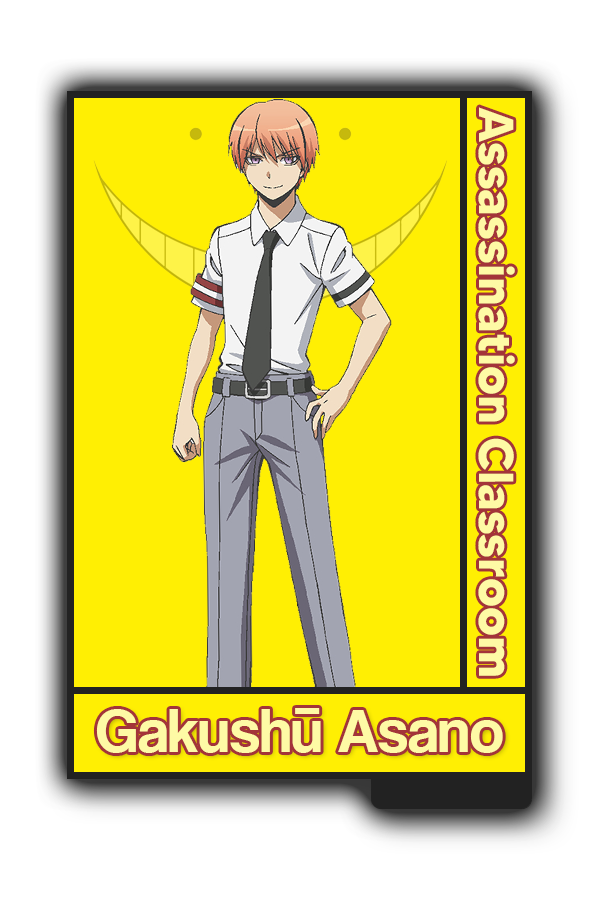
<style>
.page{position:relative;width:600px;height:900px;background:#ffef03}
.page>*{position:absolute;margin:0}
.t1{font:48.8px "MADETOMMY-Bold";color:#fefaa5}
.t2{font:62.8px "CoolveticaRg-Regular";color:#fefaa5}
</style>
<div class="page">
<p class="t1" style="left:478px;top:107px;width:37px;height:569px;rotate:90deg">Assassination Classroom</p>
<p class="t2" style="left:96px;top:708px;width:407px;height:45px">Gakushū Asano</p>
</div>
